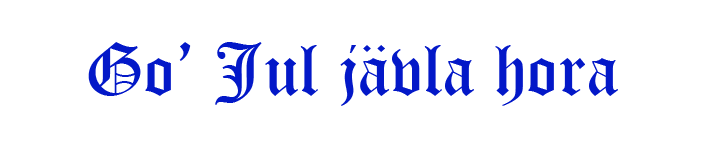
<style>
.page{position:relative;width:709px;height:142px;background:#ffffff}
.page>*{position:absolute;margin:0}
.t1{font:72px "OldEnglishTextMT";color:#0318c8}
</style>
<div class="page">
<p class="t1" style="left:88px;top:42px;width:530px;height:64px">Go’ Jul jävla hora</p>
</div>
